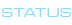
<style>
.page{position:relative;width:72px;height:25px;background:#ffffff}
.page>*{position:absolute;margin:0}
.t1{font:14px "MicrogrammaD-MediExte";letter-spacing:0.075em;color:#8dd9ff;text-transform:uppercase}
</style>
<div class="page">
<p class="t1" style="left:2px;top:8px;width:70px;height:9px">Status</p>
</div>
